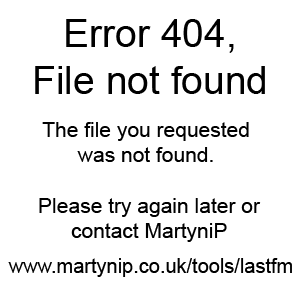
<style>
.page{position:relative;width:300px;height:295px;background:#ffffff}
.page>*{position:absolute;margin:0}
.t1{font:39px "ArialMT";color:#000000}
.t2{font:21px "ArialMT";color:#000000}
.t3{font:20px "ArialMT";color:#000000}
</style>
<div class="page">
<p class="t1" style="left:35px;top:19px;width:230px;height:75px;text-align:center">Error 404,<br>File not found</p>
<p class="t2" style="left:39px;top:122px;width:222px;height:120px;text-align:center">The file you requested <br>was not found. <br><br>Please try again later or<br>contact MartyniP</p>
<p class="t3" style="left:8px;top:258px;width:284px;height:19px">www.martynip.co.uk/tools/lastfm</p>
</div>
